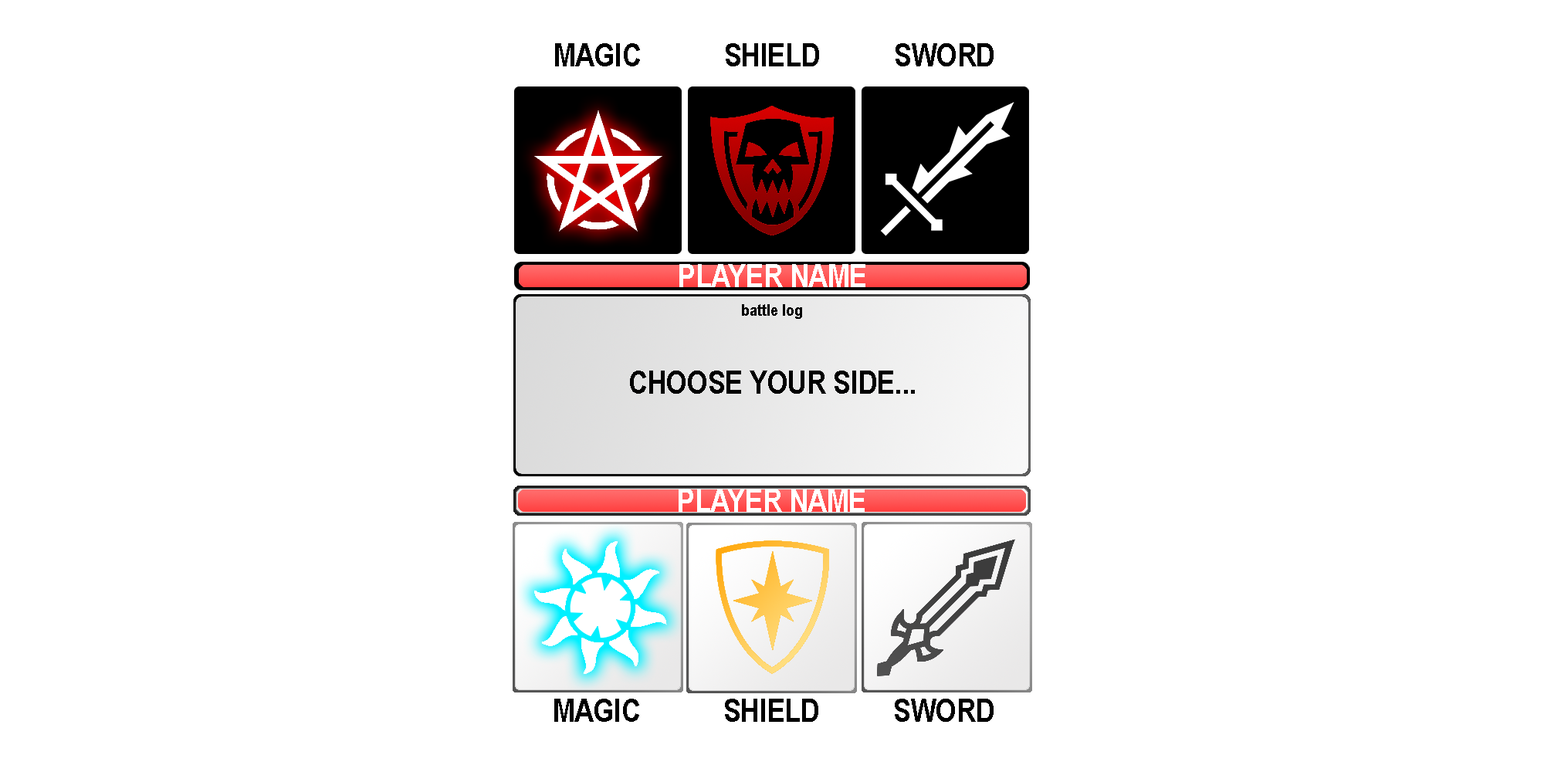
<style>
.page{position:relative;width:1544px;height:772px;background:#ffffff}
.page>*{position:absolute;margin:0}
.t1{font:32.2px "ArialNarrow-Bold";color:#000000}
.t2{font:32.2px "ArialNarrow-Bold";color:#ffffff}
.t3{font:16.1px "ArialNarrow-Bold";color:#000000}
</style>
<div class="page">
<p class="t1" style="left:555px;top:43px;width:85px;height:23px">MAGIC</p>
<p class="t1" style="left:726px;top:43px;width:93px;height:23px">SHIELD</p>
<p class="t1" style="left:896px;top:43px;width:98px;height:23px">SWORD</p>
<p class="t2" style="left:679px;top:264px;width:187px;height:23px">PLAYER NAME</p>
<p class="t3" style="left:742px;top:304px;width:60px;height:15px">battle log</p>
<p class="t1" style="left:630px;top:371px;width:285px;height:23px">CHOOSE YOUR SIDE...</p>
<p class="t2" style="left:679px;top:489px;width:186px;height:23px">PLAYER NAME</p>
<p class="t1" style="left:554px;top:699px;width:85px;height:23px">MAGIC</p>
<p class="t1" style="left:725px;top:699px;width:93px;height:23px">SHIELD</p>
<p class="t1" style="left:895px;top:699px;width:99px;height:23px">SWORD</p>
</div>
